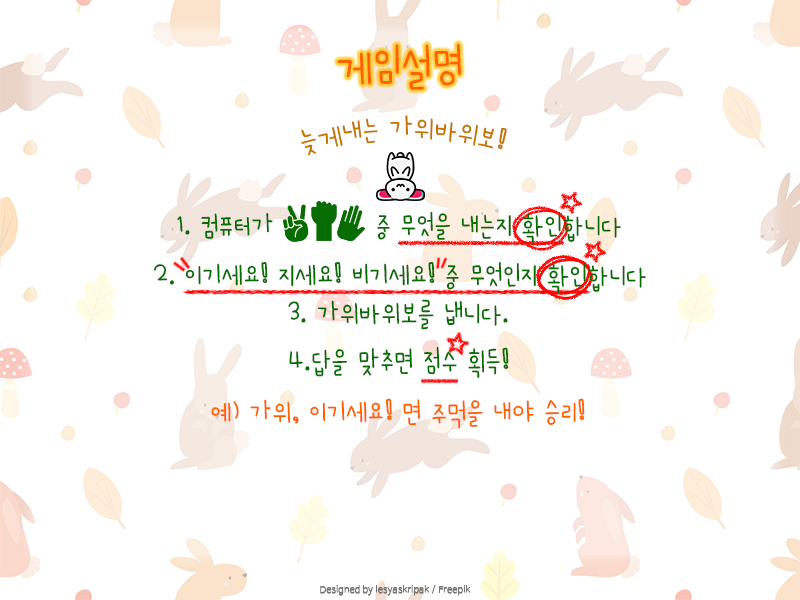
<style>
.page{position:relative;width:800px;height:600px;background:#ffffff}
.page>*{position:absolute;margin:0}
.t1{font:47.8px "UhBeeMiMi";letter-spacing:0.025em;color:#ff6000}
.t2{font:30.3px "UhBeeMiMi";letter-spacing:0.025em;color:#c37700}
.t3{font:29.8px "UhBeeMiMi";letter-spacing:0.025em;color:#076d02}
.t4{font:30px "UhBeeMiMi";letter-spacing:0.025em;color:#076d02}
.t5{font:30px "UhBeeMiMi";letter-spacing:0.025em;color:#ff6000}
</style>
<div class="page">
<p class="t1" style="left:337px;top:43px;width:124px;height:47px">게임설명</p>
<p class="t2" style="left:301px;top:115px;width:206px;height:41px">늦게내는 가위바위보!</p>
<p class="t3" style="left:177px;top:211px;width:444px;height:33px">1. 컴퓨터가           중 무엇을 내는지 확인합니다</p>
<p class="t3" style="left:153px;top:261px;width:493px;height:33px">2. 이기세요! 지세요! 비기세요! 중 무엇인지 확인합니다</p>
<p class="t4" style="left:288px;top:299px;width:220px;height:31px">3. 가위바위보를 냅니다.</p>
<p class="t4" style="left:289px;top:346px;width:220px;height:32px">4.답을 맞추면 점수 획득!</p>
<p class="t5" style="left:211px;top:398px;width:374px;height:31px">예) 가위, 이기세요! 면 주먹을 내야 승리!</p>
</div>
